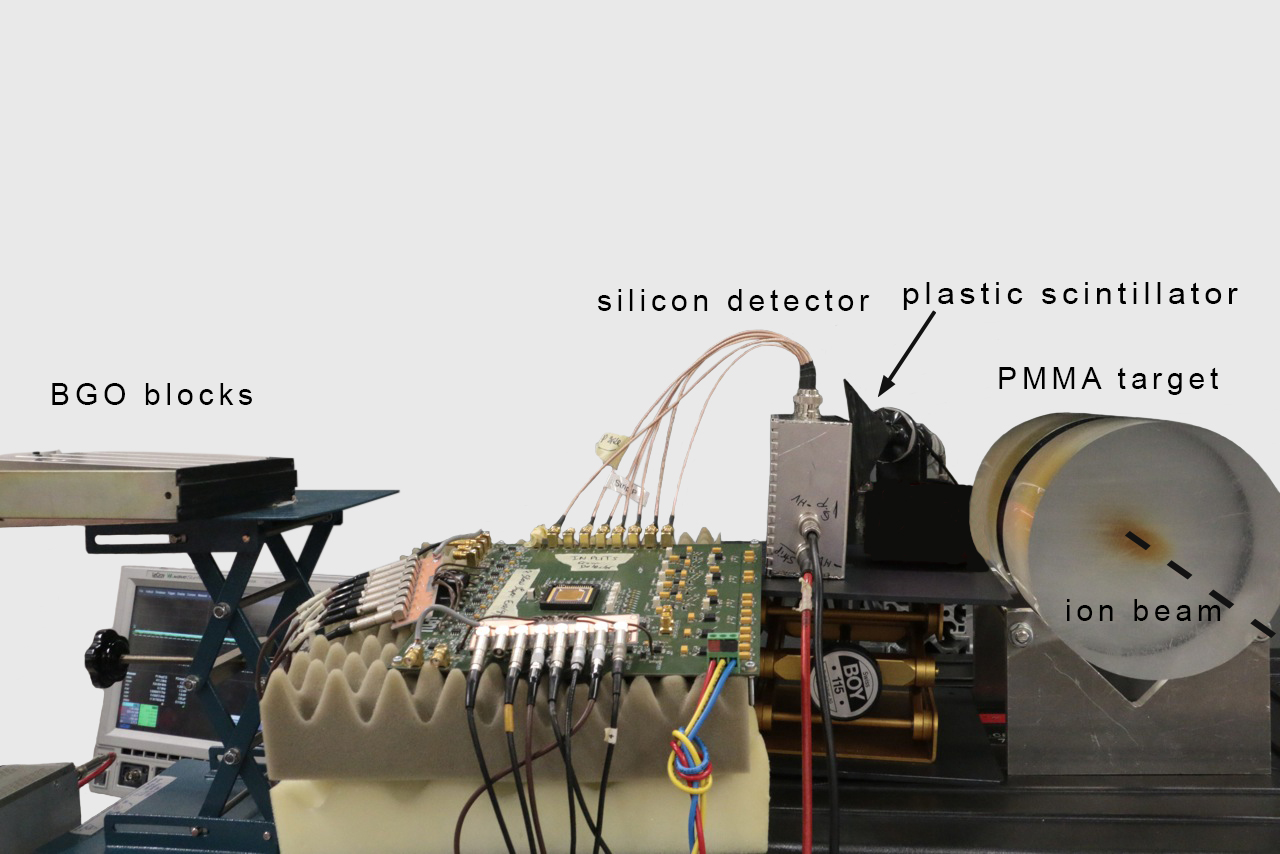
<style>
.page{position:relative;width:1280px;height:854px;background:#e9e9e9}
.page>*{position:absolute;margin:0}
.t1{font:30px "ArialMT";letter-spacing:0.16em;color:#000000}
.t2{font:30px "ArialMT";letter-spacing:0.16em;color:#000000;scale:1.06 1}
</style>
<div class="page">
<p class="t1" style="left:598px;top:289px;width:272px;height:22px">silicon detector</p>
<p class="t2" style="left:903px;top:282px;width:335px;height:28px">plastic scintillator</p>
<p class="t1" style="left:999px;top:367px;width:219px;height:28px">PMMA target</p>
<p class="t1" style="left:52px;top:383px;width:200px;height:22px">BGO blocks</p>
<p class="t1" style="left:1067px;top:599px;width:154px;height:22px">ion beam</p>
</div>
